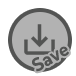
<style>
.page{position:relative;width:76px;height:76px;background:#ffffff}
.page>*{position:absolute;margin:0}
.t1{font:18.8px "MikadoMedium";color:#535453}
</style>
<div class="page">
<p class="t1" style="left:32px;top:46px;width:37px;height:26px;rotate:-30deg">Save</p>
</div>
